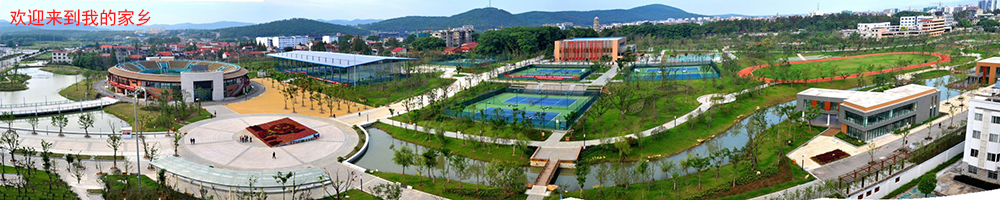
<style>
.page{position:relative;width:1000px;height:200px}
.page>*{position:absolute;margin:0}
.t1{font:18px "SimHei";color:#ff1616}
</style>
<div class="page">
<p class="t1" style="left:10px;top:9px;width:141px;height:17px">欢迎来到我的家乡</p>
</div>
